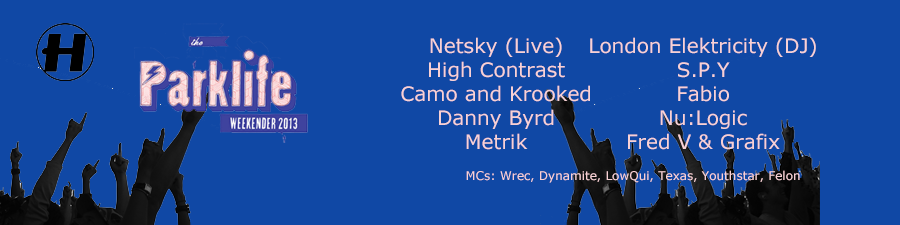
<style>
.page{position:relative;width:900px;height:225px;background:#1048a5}
.page>*{position:absolute;margin:0}
.t1{font:20px "Verdana";color:#f8d1d5}
.t2{font:12px "Verdana";color:#f8d1d5}
</style>
<div class="page">
<p class="t1" style="left:401px;top:37px;width:189px;height:113px;text-align:center">Netsky (Live)<br>High Contrast<br>Camo and Krooked<br>Danny Byrd<br>Metrik</p>
<p class="t1" style="left:590px;top:37px;width:226px;height:113px;text-align:center">London Elektricity (DJ)<br>S.P.Y<br>Fabio<br>Nu:Logic<br>Fred V &amp; Grafix</p>
<p class="t2" style="left:466px;top:170px;width:334px;height:13px">MCs: Wrec, Dynamite, LowQui, Texas, Youthstar, Felon</p>
</div>
